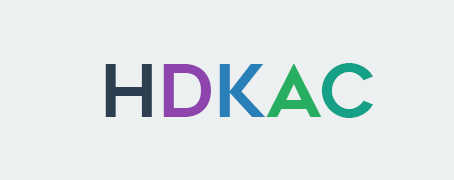
<style>
.page{position:relative;width:454px;height:180px;background:#ecf0f1}
.page>*{position:absolute;margin:0}
.t1{font:72px "Geometos";color:#2c3e50}
.t2{font:72px "Geometos";color:#8e44ad}
.t3{font:72px "Geometos";color:#2980b9}
.t4{font:72px "Geometos";color:#27ae60}
.t5{font:72px "Geometos";color:#16a085}
</style>
<div class="page">
<p class="t1" style="left:105px;top:63px;width:268px;height:55px">h<span class="t2">d</span><span class="t3">k</span><span class="t4">a</span><span class="t5">c</span></p>
</div>
